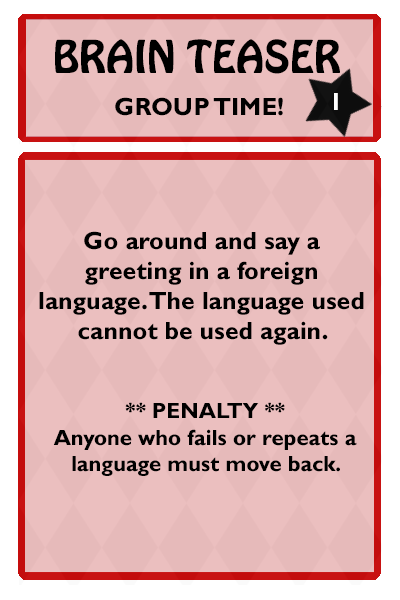
<style>
.page{position:relative;width:400px;height:600px;background:#e6baba}
.page>*{position:absolute;margin:0}
.t1{font:40px "HoboStd";color:#000000}
.t2{font:25px "GillSansMT-Bold";color:#000000}
.t3{font:25px "GillSansMT-Bold";color:#ffffff}
.t4{font:22px "GillSansMT-Bold";color:#000000}
</style>
<div class="page">
<p class="t1" style="left:55px;top:39px;width:285px;height:35px">BRAIN TEASER</p>
<p class="t2" style="left:115px;top:97px;width:168px;height:19px">GROUP TIME!</p>
<p class="t3" style="left:334px;top:93px;width:4px;height:17px">1</p>
<p class="t2" style="left:39px;top:231px;width:325px;height:245px;text-align:center">Go around and say a <br>greeting in a foreign <br>language. The language used <br>cannot be used again. <br><span class="t4"><br><br>** PENALTY **<br>Anyone who fails or repeats a<br>language must move back.</span></p>
</div>
